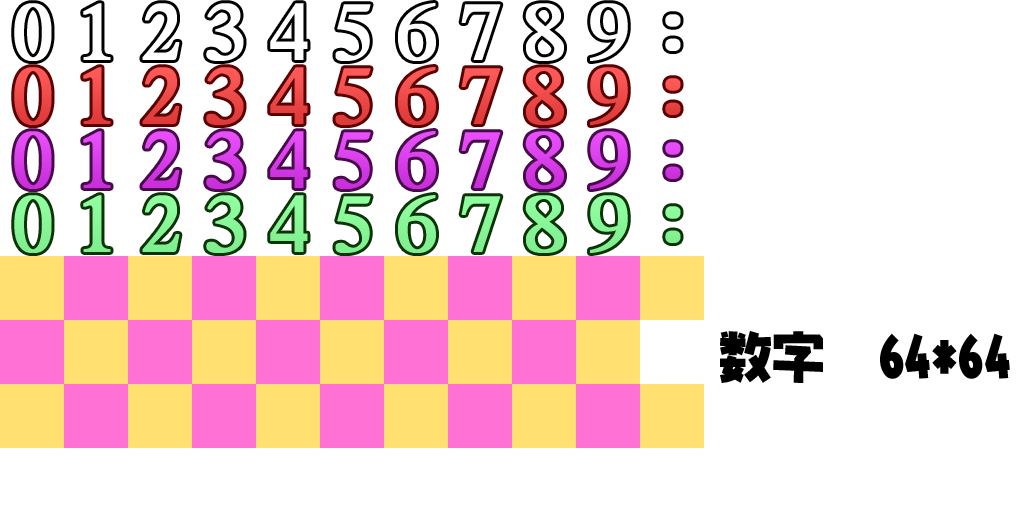
<style>
.page{position:relative;width:1024px;height:512px;background:#ffffff}
.page>*{position:absolute;margin:0}
.t1{font:75.8px "DFLeiGaSo-W5-WIN-RKSJ-H";color:#ffffff;font-weight:bold}
.t2{font:75.8px "DFLeiGaSo-W5-WIN-RKSJ-H";color:#ff4242;font-weight:bold}
.t3{font:75.8px "DFLeiGaSo-W5-WIN-RKSJ-H";color:#ed4949;font-weight:bold}
.t4{font:75.8px "DFLeiGaSo-W5-WIN-RKSJ-H";color:#e74343;font-weight:bold}
.t5{font:75.8px "DFLeiGaSo-W5-WIN-RKSJ-H";color:#e535fa;font-weight:bold}
.t6{font:75.8px "DFLeiGaSo-W5-WIN-RKSJ-H";color:#d63de8;font-weight:bold}
.t7{font:75.8px "DFLeiGaSo-W5-WIN-RKSJ-H";color:#d73ee9;font-weight:bold}
.t8{font:75.8px "DFLeiGaSo-W5-WIN-RKSJ-H";color:#d93feb;font-weight:bold}
.t9{font:75.8px "DFLeiGaSo-W5-WIN-RKSJ-H";color:#da40ec;font-weight:bold}
.t10{font:75.8px "DFLeiGaSo-W5-WIN-RKSJ-H";color:#e148f3;font-weight:bold}
.t11{font:75.8px "DFLeiGaSo-W5-WIN-RKSJ-H";color:#d138e3;font-weight:bold}
.t12{font:75.8px "DFLeiGaSo-W5-WIN-RKSJ-H";color:#80ff92;font-weight:bold}
.t13{font:52.9px "NIS-JYA-U-83pv-RKSJ-H";color:#000000}
</style>
<div class="page">
<p class="t1" style="left:14px;top:3px;width:38px;height:58px">0</p>
<p class="t1" style="left:83px;top:3px;width:28px;height:57px">1</p>
<p class="t1" style="left:142px;top:3px;width:38px;height:57px">2</p>
<p class="t1" style="left:206px;top:3px;width:38px;height:58px">3</p>
<p class="t1" style="left:270px;top:3px;width:38px;height:57px">4</p>
<p class="t1" style="left:335px;top:4px;width:36px;height:57px">5</p>
<p class="t1" style="left:398px;top:3px;width:38px;height:58px">6</p>
<p class="t1" style="left:525px;top:3px;width:39px;height:58px">8</p>
<p class="t1" style="left:590px;top:3px;width:38px;height:58px">9</p>
<p class="t1" style="left:665px;top:14px;width:16px;height:37px">:</p>
<p class="t2" style="left:14px;top:67px;width:38px;height:58px">0</p>
<p class="t2" style="left:83px;top:67px;width:28px;height:57px">1</p>
<p class="t3" style="left:142px;top:67px;width:38px;height:57px">2</p>
<p class="t2" style="left:206px;top:67px;width:38px;height:58px">3</p>
<p class="t2" style="left:270px;top:67px;width:38px;height:57px">4</p>
<p class="t2" style="left:335px;top:68px;width:36px;height:57px">5</p>
<p class="t2" style="left:398px;top:67px;width:38px;height:58px">6</p>
<p class="t2" style="left:461px;top:68px;width:40px;height:56px">7</p>
<p class="t2" style="left:525px;top:67px;width:39px;height:58px">8</p>
<p class="t2" style="left:590px;top:67px;width:38px;height:58px">9</p>
<p class="t4" style="left:665px;top:78px;width:16px;height:37px">:</p>
<p class="t5" style="left:14px;top:131px;width:38px;height:58px">0</p>
<p class="t6" style="left:83px;top:131px;width:28px;height:57px">1</p>
<p class="t7" style="left:142px;top:131px;width:38px;height:57px">2</p>
<p class="t8" style="left:206px;top:131px;width:38px;height:58px">3</p>
<p class="t5" style="left:270px;top:131px;width:38px;height:57px">4</p>
<p class="t9" style="left:335px;top:132px;width:36px;height:57px">5</p>
<p class="t5" style="left:398px;top:131px;width:38px;height:58px">6</p>
<p class="t10" style="left:461px;top:132px;width:40px;height:56px">7</p>
<p class="t5" style="left:525px;top:131px;width:39px;height:58px">8</p>
<p class="t5" style="left:590px;top:131px;width:38px;height:58px">9</p>
<p class="t11" style="left:665px;top:142px;width:16px;height:37px">:</p>
<p class="t12" style="left:14px;top:195px;width:38px;height:58px">0</p>
<p class="t12" style="left:83px;top:195px;width:28px;height:57px">1</p>
<p class="t12" style="left:142px;top:195px;width:38px;height:57px">2</p>
<p class="t12" style="left:206px;top:195px;width:38px;height:58px">3</p>
<p class="t12" style="left:270px;top:195px;width:38px;height:57px">4</p>
<p class="t12" style="left:335px;top:196px;width:36px;height:57px">5</p>
<p class="t12" style="left:398px;top:195px;width:38px;height:58px">6</p>
<p class="t12" style="left:525px;top:195px;width:39px;height:58px">8</p>
<p class="t12" style="left:590px;top:195px;width:38px;height:58px">9</p>
<p class="t12" style="left:665px;top:206px;width:16px;height:37px">:</p>
<p class="t13" style="left:720px;top:331px;width:290px;height:52px">数字　64*64</p>
</div>
